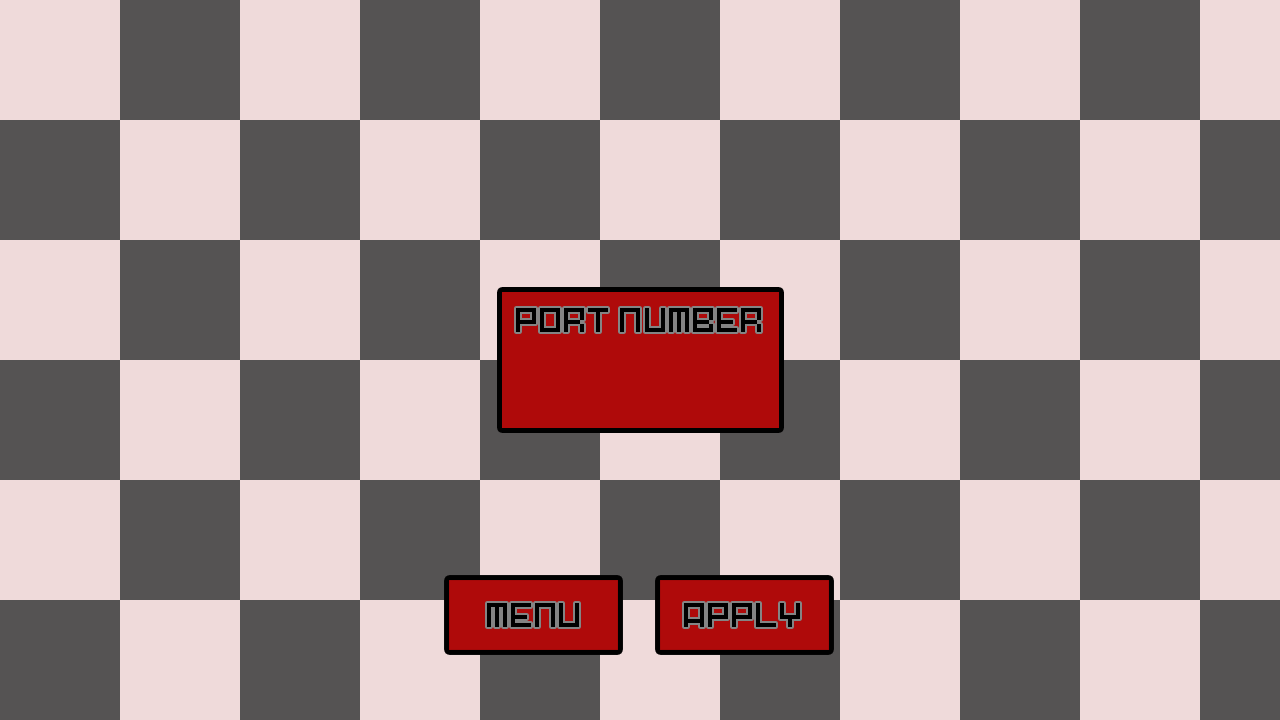
<style>
.page{position:relative;width:1280px;height:720px;background:#efdada}
.page>*{position:absolute;margin:0}
.t1{font:32px "Pixel-Art";color:#000000}
</style>
<div class="page">
<p class="t1" style="left:516px;top:308px;width:245px;height:24px">PORT NUMBER</p>
<p class="t1" style="left:487px;top:603px;width:92px;height:24px">MENU</p>
<p class="t1" style="left:684px;top:603px;width:116px;height:24px">APPLY</p>
</div>
